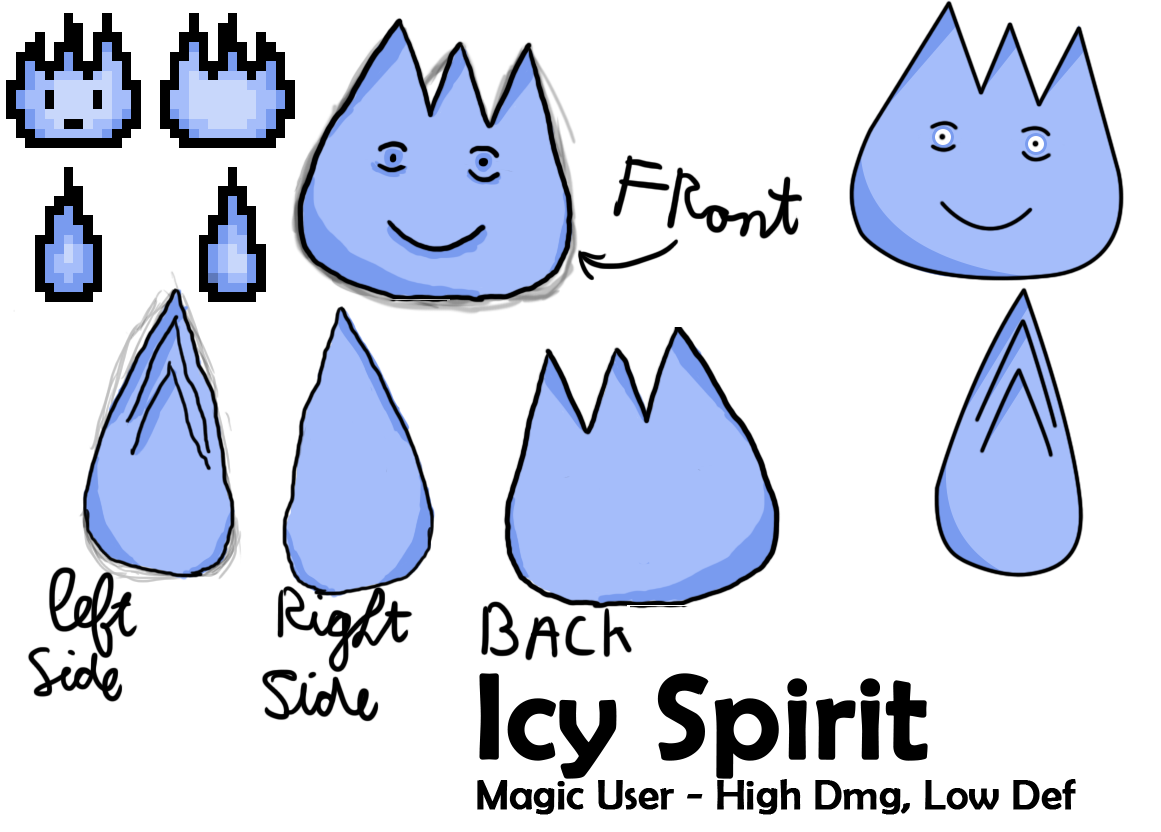
<style>
.page{position:relative;width:1161px;height:832px;background:#ffffff}
.page>*{position:absolute;margin:0}
.t1{font:41.7px "BerlinSansFB-Reg";color:#000000;font-weight:bold}
.t2{font:120.9px "BerlinSansFB-Reg";color:#000000;font-weight:bold}
</style>
<div class="page">
<p class="t1" style="left:477px;top:673px;width:599px;height:142px"><span class="t2">Icy Spirit<br></span>Magic User - High Dmg, Low Def</p>
</div>
